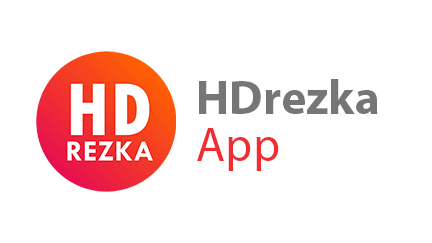
<style>
.page{position:relative;width:432px;height:243px;background:#ffffff}
.page>*{position:absolute;margin:0}
.t1{font:48px "MyriadPro-Bold";color:#767676}
.t2{font:48px "MyriadPro-Regular";color:#ef2d33}
</style>
<div class="page">
<p class="t1" style="left:199px;top:79px;width:179px;height:35px">HDrezka</p>
<p class="t2" style="left:197px;top:128px;width:82px;height:43px">App</p>
</div>
